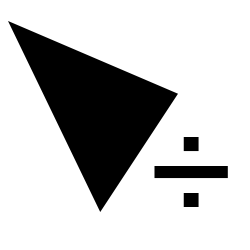
<style>
.page{position:relative;width:250px;height:250px;background:#ffffff}
.page>*{position:absolute;margin:0}
.t1{font:143.3px "Helvetica";color:#000000}
</style>
<div class="page">
<p class="t1" style="left:154px;top:137px;width:74px;height:70px">÷</p>
</div>
